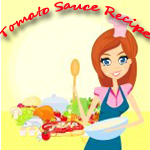
<style>
.page{position:relative;width:150px;height:150px}
.page>*{position:absolute;margin:0}
.t1{font:12px "SegoeScript-Bold";color:#ff0018}
</style>
<div class="page">
<p class="t1" style="left:0px;top:1px;width:151px;height:38px">Tomato Sauce Recipe</p>
</div>
